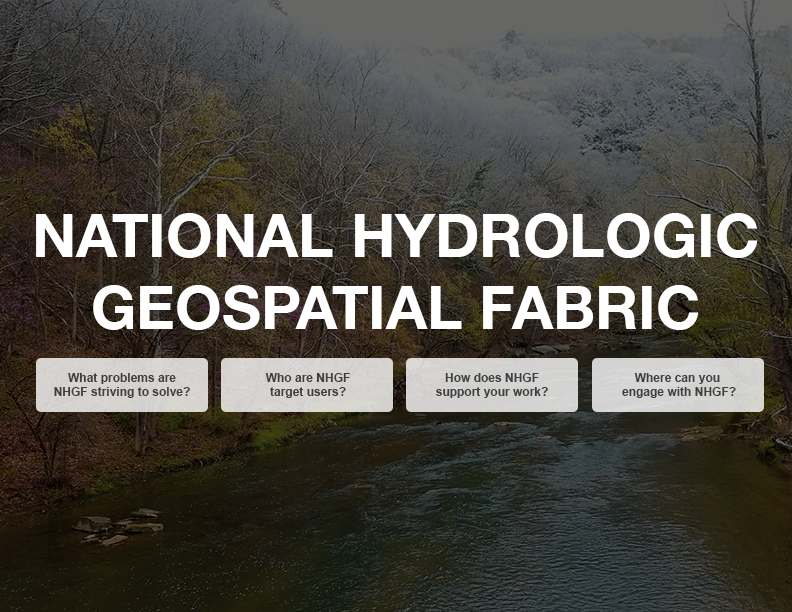
<style>
.page{position:relative;width:792px;height:612px}
.page>*{position:absolute;margin:0}
.t1{font:60px "HelveticaNeue-Bold";color:#ffffff}
.t2{font:12px "Arial-BoldMT";color:#3f3f3f}
</style>
<div class="page">
<p class="t1" style="left:36px;top:213px;width:722px;height:117px;text-align:center">NATIONAL HYDROLOGIC<br>GEOSPATIAL FABRIC</p>
<p class="t2" style="left:54px;top:373px;width:136px;height:25px;text-align:center">What problems are<br>NHGF striving to solve?</p>
<p class="t2" style="left:265px;top:373px;width:85px;height:25px;text-align:center">Who are NHGF<br>target users?</p>
<p class="t2" style="left:436px;top:373px;width:112px;height:25px;text-align:center">How does NHGF<br>support your work?</p>
<p class="t2" style="left:622px;top:373px;width:114px;height:25px;text-align:center">Where can you <br>engage with NHGF?</p>
</div>
